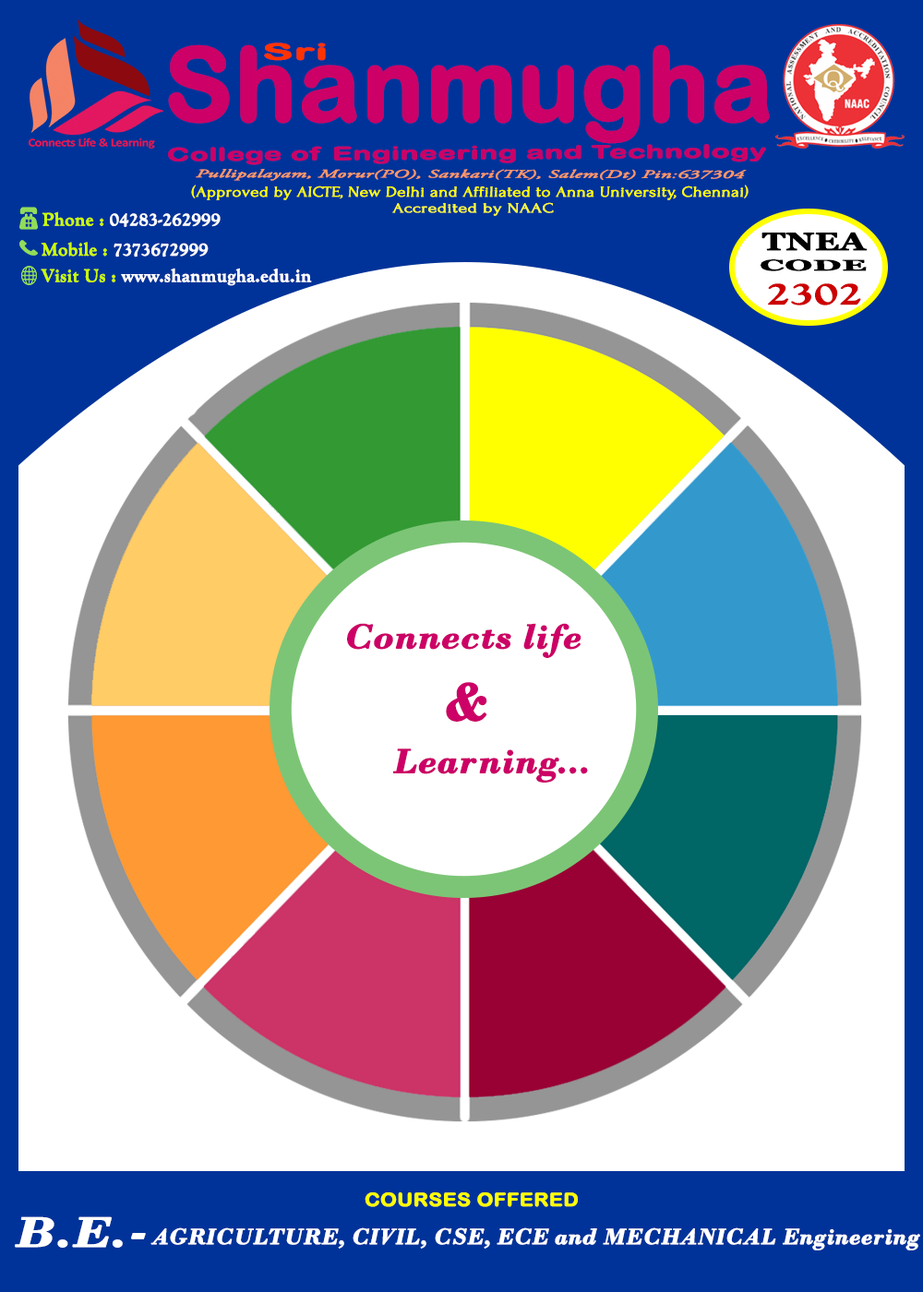
<style>
.page{position:relative;width:923px;height:1292px;background:#ffffff}
.page>*{position:absolute;margin:0}
.t1{font:101.5px "ArialRoundedMTBold";color:#cc0066;font-weight:bold}
.t2{font:22.3px "ArialRoundedMTBold";color:#ff3300;font-weight:bold;scale:2.04 1}
.t3{font:18.2px "ArialRoundedMTBold";color:#cc0066;font-weight:bold;scale:1.65 1}
.t4{font:11.3px "AGaramondPro-Italic";color:#ff9966;font-weight:bold;scale:1.87 1}
.t5{font:15px "Forum";color:#ffff00;font-weight:bold;scale:1.17 1}
.t6{font:13.8px "Forum";color:#ffff33;font-weight:bold;scale:1.33 1}
.t7{font:18.5px "GoudyOldStyleT-Bold";color:#ffffff;font-weight:bold}
.t8{font:18.5px "GoudyOldStyleT-Bold";color:#ccff00;font-weight:bold}
.t9{font:24.6px "Georgia-Bold";color:#000000;font-weight:bold;scale:1.36 1}
.t10{font:15.1px "Georgia-Bold";color:#000000;font-weight:bold;scale:2.22 1}
.t11{font:31.7px "GoudyOldStyleT-Bold";color:#cc0000;font-weight:bold;scale:1.44 1}
.t12{font:35.9px "BodoniMT-BoldItalic";color:#cc0066;font-weight:bold;scale:1.04 1}
.t13{font:55.4px "BodoniMT-BoldItalic";color:#cc0066;font-weight:bold}
.t14{font:18.5px "ArialRoundedMTBold";color:#ffff00;font-weight:bold;scale:1.11 1}
.t15{font:43.8px "BodoniMT-BoldItalic";color:#ffffff;font-weight:bold;scale:1.23 1}
.t16{font:23.1px "BodoniMT-BoldItalic";color:#ffffff;font-weight:bold}
</style>
<div class="page">
<p class="t1" style="left:168px;top:44px;width:602px;height:100px">Shanmugha</p>
<p class="t2" style="left:264px;top:42px;width:62px;height:19px">Sri</p>
<p class="t3" style="left:168px;top:144px;width:598px;height:21px">College of Engineering and Technology</p>
<p class="t4" style="left:196px;top:169px;width:551px;height:12px">Pullipalayam, Morur(PO), Sankari(TK), Salem(Dt) Pin:637304</p>
<p class="t5" style="left:191px;top:185px;width:557px;height:15px">(Approved by AICTE, New Delhi and Affiliated to Anna University, Chennai)</p>
<p class="t6" style="left:392px;top:202px;width:162px;height:14px">Accredited by NAAC</p>
<p class="t7" style="left:42px;top:211px;width:179px;height:16px"><span class="t8">Phone : </span>04283-262999</p>
<p class="t9" style="left:761px;top:232px;width:107px;height:19px">TNEA</p>
<p class="t7" style="left:41px;top:242px;width:168px;height:15px"><span class="t8">Mobile : </span>7373672999</p>
<p class="t7" style="left:41px;top:268px;width:271px;height:18px"><span class="t8">Visit Us : </span>www.shanmugha.edu.in</p>
<p class="t10" style="left:760px;top:259px;width:107px;height:12px">CODE</p>
<p class="t11" style="left:768px;top:283px;width:93px;height:22px">2302</p>
<p class="t12" style="left:347px;top:623px;width:234px;height:35px">Connects life</p>
<p class="t13" style="left:446px;top:682px;width:41px;height:40px">&amp;</p>
<p class="t12" style="left:392px;top:748px;width:196px;height:35px">Learning...</p>
<p class="t14" style="left:365px;top:1192px;width:213px;height:15px">COURSES OFFERED</p>
<p class="t15" style="left:15px;top:1216px;width:131px;height:32px">B.E.-</p>
<p class="t16" style="left:150px;top:1227px;width:770px;height:24px">AGRICULTURE, CIVIL, CSE, ECE and MECHANICAL Engineering</p>
</div>
